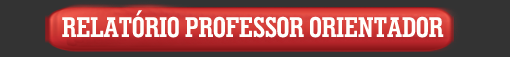
<style>
.page{position:relative;width:510px;height:57px;background:#333333}
.page>*{position:absolute;margin:0}
.t1{font:28.7px "GeometricSlab703BT-BoldCond";color:#fffffc;scale:0.97 1}
</style>
<div class="page">
<p class="t1" style="left:62px;top:10px;width:382px;height:28px">RELATÓRIO PROFESSOR ORIENTADOR</p>
</div>
